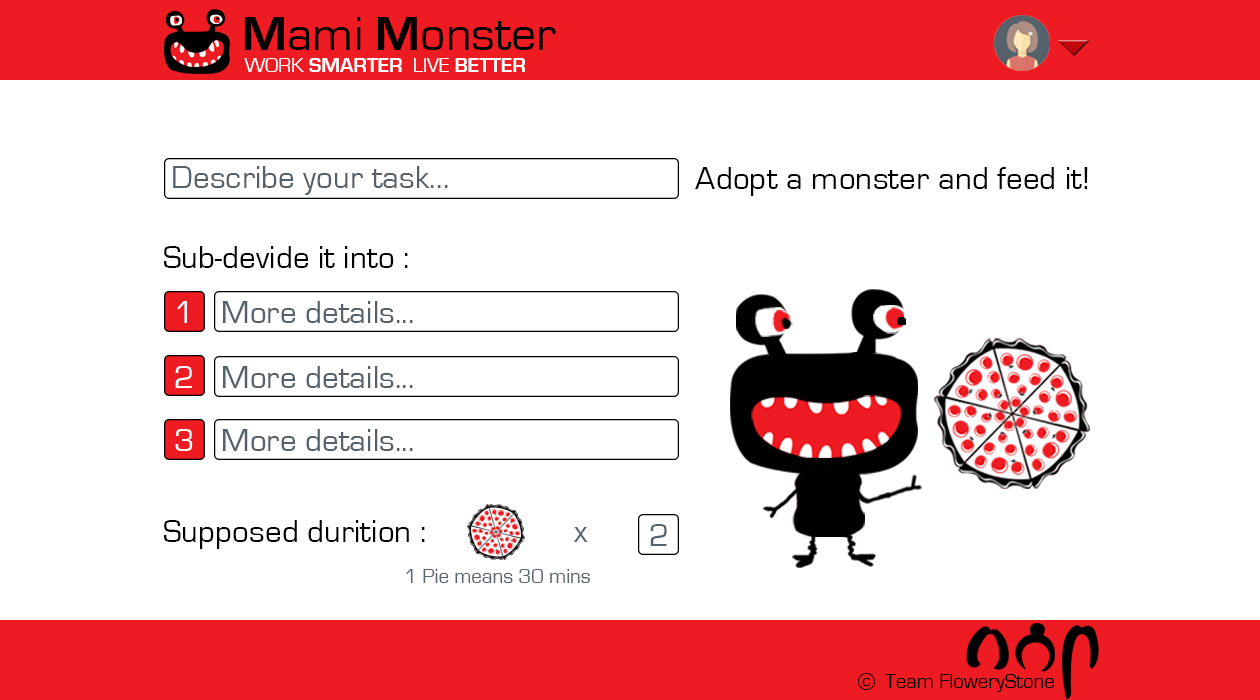
<style>
.page{position:relative;width:1260px;height:700px;background:#ffffff}
.page>*{position:absolute;margin:0}
.t1{font:50px "EurostileRegular";color:#000000}
.t2{font:50px "EurostileBold";color:#000000}
.t3{font:20.8px "EurostileBold";color:#ffffff}
.t4{font:20.8px "EurostileRegular";color:#ffffff}
.t5{font:33.3px "EurostileRegular";color:#54616a}
.t6{font:33.3px "EurostileRegular";color:#000000}
.t7{font:33.3px "EurostileRegular";color:#ffffff}
.t8{font:33.3px "EurostileRegular";color:#56636c}
.t9{font:20.8px "EurostileRegular";color:#56636c}
.t10{font:17.7px "EurostileRegular";color:#000000}
.t11{font:20.8px "EurostileRegular";color:#000000}
</style>
<div class="page">
<p class="t1" style="left:244px;top:17px;width:312px;height:33px"><span class="t2">M</span>ami <span class="t2">M</span>onster</p>
<p class="t3" style="left:244px;top:58px;width:281px;height:14px"><span class="t4">WORK </span>SMARTER<span class="t4">  LIVE </span>BETTER</p>
<p class="t5" style="left:173px;top:166px;width:275px;height:29px">Describe your task...</p>
<p class="t6" style="left:695px;top:167px;width:393px;height:29px">Adopt a monster and feed it!</p>
<p class="t6" style="left:164px;top:246px;width:244px;height:22px">Sub-devide it into :</p>
<p class="t7" style="left:177px;top:301px;width:10px;height:22px">1</p>
<p class="t5" style="left:223px;top:301px;width:190px;height:22px">More details...</p>
<p class="t7" style="left:175px;top:366px;width:17px;height:22px">2</p>
<p class="t5" style="left:223px;top:366px;width:190px;height:22px">More details...</p>
<p class="t7" style="left:175px;top:429px;width:18px;height:22px">3</p>
<p class="t5" style="left:223px;top:429px;width:190px;height:22px">More details...</p>
<p class="t6" style="left:164px;top:520px;width:261px;height:29px">Supposed durition :</p>
<p class="t8" style="left:573px;top:527px;width:15px;height:15px">x</p>
<p class="t8" style="left:650px;top:524px;width:17px;height:22px">2</p>
<p class="t9" style="left:406px;top:569px;width:184px;height:14px">1 Pie means 30 mins</p>
<p class="t10" style="left:862px;top:678px;width:9px;height:8px">c</p>
<p class="t11" style="left:885px;top:674px;width:169px;height:18px">Team FloweryStone</p>
</div>
